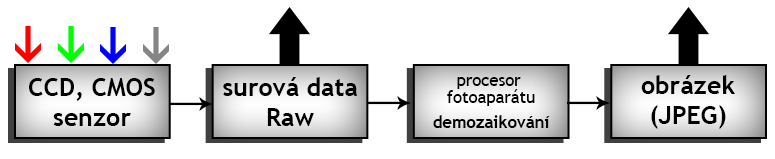
<style>
.page{position:relative;width:775px;height:159px;background:#ffffff}
.page>*{position:absolute;margin:0}
.t1{font:25px "TrebuchetMS-Bold";color:#000000}
.t2{font:16.7px/16.7px "TrebuchetMS";color:#000000}
.t3{font:16.7px/25px "TrebuchetMS-Bold";color:#000000}
</style>
<div class="page">
<p class="t1" style="left:29px;top:78px;width:126px;height:48px;text-align:center">CCD, CMOS<br>senzor</p>
<p class="t1" style="left:223px;top:77px;width:135px;height:49px;text-align:center">surová data<br>Raw</p>
<p class="t2" style="left:433px;top:77px;width:117px;height:51px;text-align:center">procesor <br>fotoaparátu<br><span class="t3">demozaikování</span></p>
<p class="t1" style="left:641px;top:75px;width:94px;height:54px;text-align:center">obrázek<br>(JPEG)</p>
</div>
